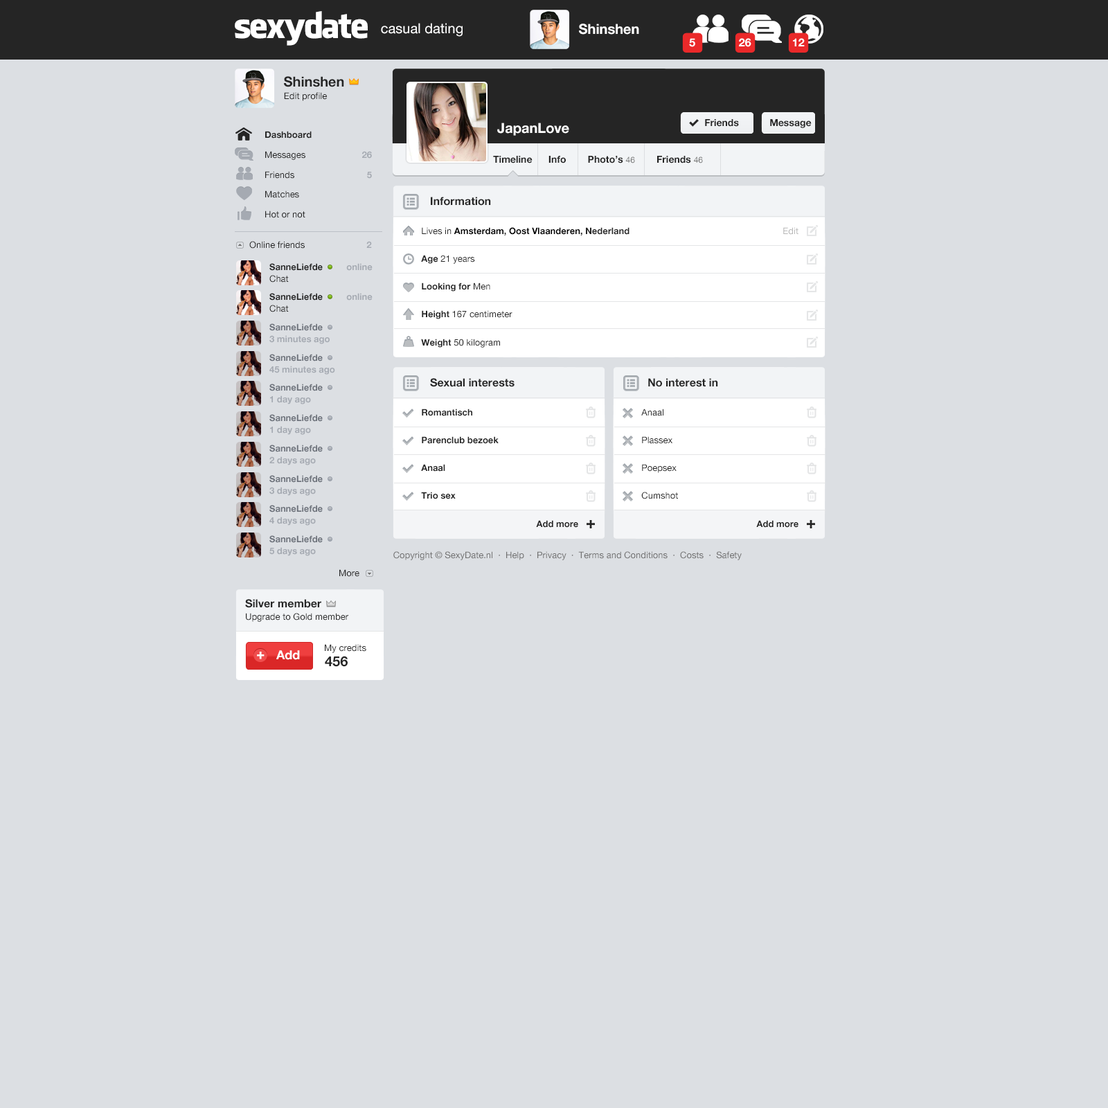
<style>
.page{position:relative;width:1108px;height:1108px;background:#dcdfe3}
.page>*{position:absolute;margin:0}
.t1{font:34.6px "FacebookLetterFaces";letter-spacing:-0.05em;color:#ffffff}
.t2{font:13.8px "HelveticaNeue";color:#ffffff}
.t3{font:13.8px "HelveticaNeue-Bold";color:#ffffff}
.t4{font:11.1px "HelveticaNeue-Bold";color:#ffffff}
.t5{font:13.8px "HelveticaNeue-Bold";color:#252525}
.t6{font:9px "HelveticaNeue";color:#252525}
.t7{font:9.7px "HelveticaNeue-Bold";color:#252525}
.t8{font:9px/20px "HelveticaNeue";color:#252525}
.t9{font:9px/20px "HelveticaNeue-Bold";color:#252525}
.t10{font:9px/20px "HelveticaNeue-Bold";color:#a5aab2}
.t11{font:8.3px "HelveticaNeue";color:#737373}
.t12{font:11.1px "HelveticaNeue-Bold";color:#252525}
.t13{font:9px/13.8px "HelveticaNeue-Bold";color:#000000}
.t14{font:9px/13.8px "HelveticaNeue";color:#252525}
.t15{font:9px/13.8px "HelveticaNeue-Bold";color:#252525}
.t16{font:9px/13.9px "HelveticaNeue-Bold";color:#252525}
.t17{font:9px/13.9px "HelveticaNeue";color:#252525}
.t18{font:9px "HelveticaNeue";color:#b8b8b8}
.t19{font:9px "HelveticaNeue-Bold";color:#a5aab2}
.t20{font:9px/11.8px "HelveticaNeue-Bold";color:#252525}
.t21{font:9px/11.8px "HelveticaNeue-Bold";color:#a5aab2}
.t22{font:9px/11.8px "HelveticaNeue";color:#252525}
.t23{font:9px/11.8px "HelveticaNeue-Bold";color:#6d727b}
.t24{font:9px "HelveticaNeue";color:#707070}
.t25{font:13.2px "HelveticaNeue-Bold";color:#ffffff;font-weight:bold}
.t26{font:12.5px "HelveticaNeue-Bold";color:#ffffff}
</style>
<div class="page">
<p class="t1" style="left:235px;top:11px;width:133px;height:35px">sexydate</p>
<p class="t2" style="left:381px;top:23px;width:81px;height:14px">casual dating</p>
<p class="t3" style="left:579px;top:24px;width:60px;height:11px">Shinshen</p>
<p class="t4" style="left:689px;top:38px;width:6px;height:9px">5</p>
<p class="t4" style="left:739px;top:38px;width:12px;height:9px">26</p>
<p class="t4" style="left:793px;top:38px;width:11px;height:8px">12</p>
<p class="t5" style="left:284px;top:76px;width:60px;height:11px">Shinshen</p>
<p class="t6" style="left:284px;top:92px;width:43px;height:9px">Edit profile</p>
<p class="t3" style="left:497px;top:123px;width:72px;height:13px">JapanLove</p>
<p class="t7" style="left:705px;top:119px;width:34px;height:8px">Friends</p>
<p class="t7" style="left:770px;top:119px;width:41px;height:9px">Message</p>
<p class="t8" style="left:265px;top:131px;width:47px;height:87px"><span class="t9">Dashboard<br></span>Messages<br>Friends<br>Matches<br>Hot or not</p>
<p class="t10" style="left:362px;top:151px;width:10px;height:28px;text-align:right">26<br>5</p>
<p class="t7" style="left:493px;top:156px;width:210px;height:7px">Timeline      Info        Photo’s <span class="t11">46</span>        Friends <span class="t11">46</span></p>
<p class="t12" style="left:431px;top:197px;width:60px;height:9px">Information</p>
<p class="t13" style="left:421px;top:227px;width:208px;height:121px"><span class="t14">       Lives in </span>Amsterdam<span class="t15">, </span>Oost Vlaanderen<span class="t15">, Nederland<br><br>       </span><span class="t16">Age </span><span class="t17">21 years<br><br>       </span><span class="t16">Looking for </span><span class="t17">Men<br><br>       </span><span class="t16">Height </span><span class="t17">167 centimeter<br><br>       </span><span class="t16">Weight </span><span class="t17">50 kilogram</span></p>
<p class="t18" style="left:783px;top:227px;width:15px;height:8px">Edit</p>
<p class="t6" style="left:249px;top:241px;width:123px;height:8px">Online friends      <span class="t19">2</span></p>
<p class="t20" style="left:269px;top:263px;width:103px;height:19px">SanneLiefde          <span class="t21">online<br></span><span class="t22">Chat</span></p>
<p class="t20" style="left:269px;top:293px;width:103px;height:19px">SanneLiefde          <span class="t21">online<br></span><span class="t22">Chat</span></p>
<p class="t21" style="left:269px;top:323px;width:61px;height:21px"><span class="t23">SanneLiefde<br></span>3 minutes ago</p>
<p class="t21" style="left:269px;top:354px;width:66px;height:21px"><span class="t23">SanneLiefde<br></span>45 minutes ago</p>
<p class="t23" style="left:269px;top:384px;width:54px;height:20px">SanneLiefde<br><span class="t21">1 day ago</span></p>
<p class="t12" style="left:430px;top:378px;width:84px;height:9px">Sexual interests</p>
<p class="t12" style="left:648px;top:378px;width:70px;height:9px">No interest in</p>
<p class="t23" style="left:269px;top:414px;width:54px;height:21px">SanneLiefde<br><span class="t21">1 day ago</span></p>
<p class="t16" style="left:421px;top:408px;width:157px;height:120px"><span class="t15">       Romantisch<br><br>       Parenclub bezoek<br><br> </span>      Anaal<br><br>       Trio sex<br><br>                                                     Add more</p>
<p class="t17" style="left:641px;top:408px;width:157px;height:120px"><span class="t14">       Anaal<br><br>       Plassex<br><br> </span>      Poepsex<br><br>       Cumshot<br><br> <span class="t16">                                                    Add more</span></p>
<p class="t23" style="left:269px;top:444px;width:54px;height:21px">SanneLiefde<br><span class="t21">2 days ago</span></p>
<p class="t23" style="left:269px;top:475px;width:54px;height:21px">SanneLiefde<br><span class="t21">3 days ago</span></p>
<p class="t23" style="left:269px;top:505px;width:54px;height:20px">SanneLiefde<br><span class="t21">4 days ago</span></p>
<p class="t23" style="left:269px;top:535px;width:54px;height:21px">SanneLiefde<br><span class="t21">5 days ago</span></p>
<p class="t24" style="left:393px;top:551px;width:348px;height:9px">Copyright © SexyDate.nl  ·  Help  ·  Privacy  ·  Terms and Conditions  ·  Costs  ·  Safety</p>
<p class="t6" style="left:339px;top:569px;width:20px;height:8px">More</p>
<p class="t12" style="left:245px;top:599px;width:76px;height:9px">Silver member</p>
<p class="t6" style="left:246px;top:613px;width:102px;height:9px">Upgrade to Gold member</p>
<p class="t25" style="left:257px;top:651px;width:7px;height:8px">+</p>
<p class="t26" style="left:276px;top:650px;width:24px;height:10px">Add</p>
<p class="t6" style="left:325px;top:644px;width:41px;height:9px">My credits</p>
<p class="t5" style="left:325px;top:656px;width:23px;height:11px">456</p>
</div>
